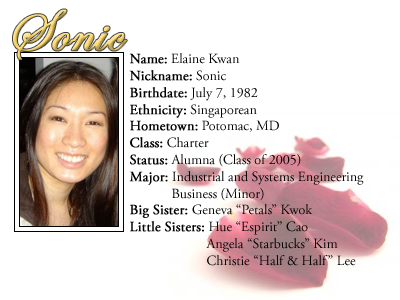
<style>
.page{position:relative;width:400px;height:300px;background:#ffffff}
.page>*{position:absolute;margin:0}
.t1{font:60px "EdwardianScriptITC";font-weight:bold}
.t2{font:14px "AGaramondPro-Regular";color:#000000}
.t3{font:14px "AGaramondPro-Regular";color:#000000;font-weight:bold}
</style>
<div class="page">
<p class="t1" style="left:13px;top:9px;width:114px;height:51px">Sonic</p>
<p class="t2" style="left:129px;top:53px;width:235px;height:213px"><span class="t3">Name:</span> Elaine Kwan<br><span class="t3">Nickname:</span> Sonic<br><span class="t3">Birthdate:</span> July 7, 1982<br><span class="t3">Ethnicity:</span> Singaporean<br><span class="t3">Hometown:</span> Potomac, MD<br><span class="t3">Class:</span> Charter<br><span class="t3">Status:</span> Alumna (Class of 2005)<br><span class="t3">Major:</span> Industrial and Systems Engineering<br>            Business (Minor)<br><span class="t3">Big Sister: </span>Geneva “Petals” Kwok<br><span class="t3">Little Sisters:</span> Hue “Espirit” Cao<br>                      Angela “Starbucks” Kim<br>                      Christie “Half &amp; Half” Lee</p>
</div>
